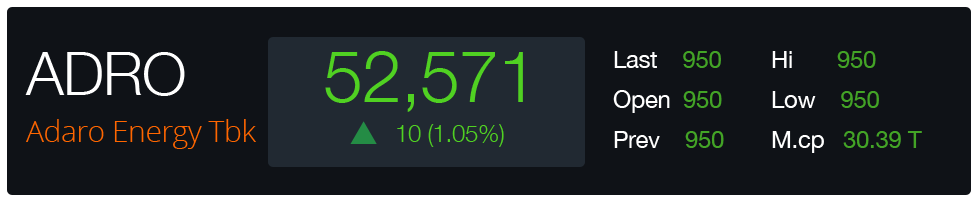
<style>
.page{position:relative;width:980px;height:200px;background:#0f1217}
.page>*{position:absolute;margin:0}
.t1{font:60px "HelveticaNeue-Light";letter-spacing:-0.015em;color:#ffffff}
.t2{font:72px "HelveticaNeue-Light";letter-spacing:-0.015em;color:#50d122}
.t3{font:24px "HelveticaNeue";letter-spacing:-0.015em;color:#ffffff}
.t4{font:24px "HelveticaNeue";letter-spacing:-0.015em;color:#43a426}
.t5{font:30px "OpenSans-Light";letter-spacing:-0.015em;color:#ff6600}
.t6{font:24px "HelveticaNeue-Light";letter-spacing:-0.015em;color:#50d122}
</style>
<div class="page">
<p class="t1" style="left:25px;top:52px;width:160px;height:44px">ADRO</p>
<p class="t2" style="left:325px;top:51px;width:198px;height:61px">52,571</p>
<p class="t3" style="left:614px;top:51px;width:107px;height:17px">Last    <span class="t4">950</span></p>
<p class="t4" style="left:772px;top:51px;width:104px;height:17px"><span class="t3">Hi       </span>950</p>
<p class="t3" style="left:613px;top:90px;width:109px;height:23px">Open  <span class="t4">950</span></p>
<p class="t3" style="left:772px;top:91px;width:107px;height:17px">Low    <span class="t4">950</span></p>
<p class="t5" style="left:26px;top:119px;width:230px;height:30px">Adaro Energy Tbk</p>
<p class="t6" style="left:397px;top:124px;width:107px;height:23px">10 (1.05%)</p>
<p class="t3" style="left:614px;top:131px;width:110px;height:17px">Prev    <span class="t4">950</span></p>
<p class="t4" style="left:772px;top:131px;width:150px;height:22px"><span class="t3">M.cp</span>   30.39 T</p>
</div>
